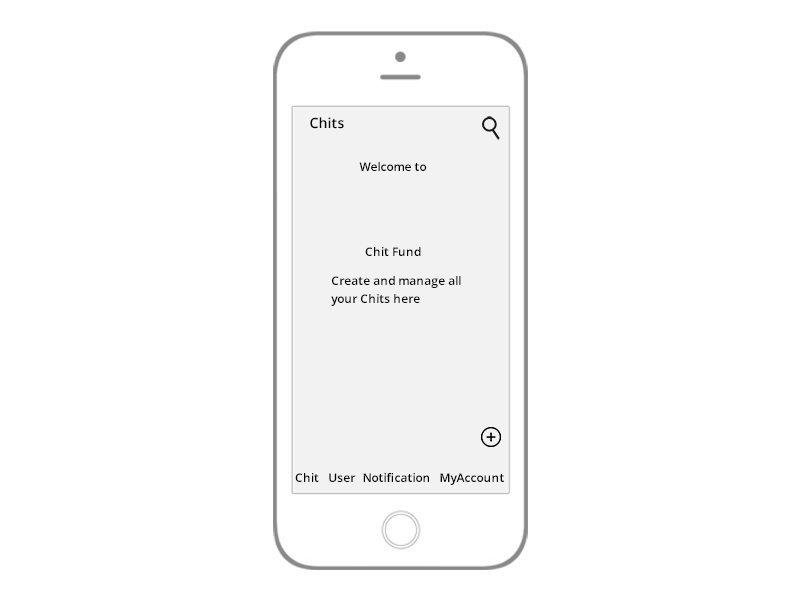
<style>
.page{position:relative;width:800px;height:600px;background:#ffffff}
.page>*{position:absolute;margin:0}
.t1{font:14px "OpenSans-Semibold";color:#030303}
.t2{font:12px "OpenSans-Semibold";color:#030303}
.t3{font:12px/6px "OpenSans-Semibold";color:#030303}
</style>
<div class="page">
<p class="t1" style="left:310px;top:117px;width:34px;height:12px">Chits</p>
<p class="t2" style="left:359px;top:162px;width:68px;height:9px">Welcome to</p>
<p class="t2" style="left:365px;top:247px;width:56px;height:9px">Chit Fund</p>
<p class="t3" style="left:331px;top:276px;width:130px;height:30px">Create and manage all <br><br><br>your Chits here</p>
<p class="t2" style="left:295px;top:473px;width:24px;height:9px">Chit</p>
<p class="t2" style="left:329px;top:473px;width:27px;height:9px">User</p>
<p class="t2" style="left:363px;top:473px;width:66px;height:9px">Notification</p>
<p class="t2" style="left:440px;top:473px;width:64px;height:12px">MyAccount</p>
</div>
